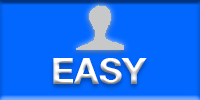
<style>
.page{position:relative;width:200px;height:100px;background:#0267ff}
.page>*{position:absolute;margin:0}
.t1{font:36px "HelveticaNeue-Bold"}
</style>
<div class="page">
<p class="t1" style="left:53px;top:58px;width:94px;height:26px">EASY</p>
</div>
